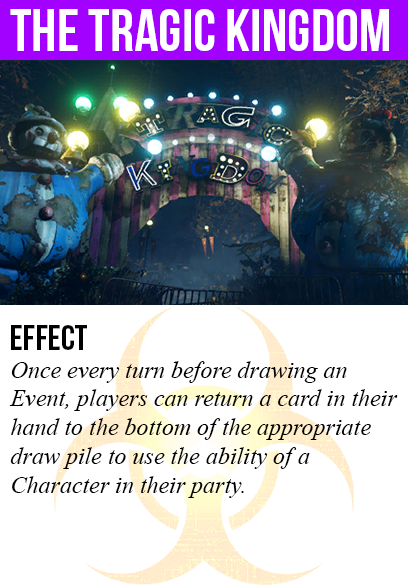
<style>
.page{position:relative;width:408px;height:585px;background:#ffffff}
.page>*{position:absolute;margin:0}
.t1{font:60px "BebasNeue";color:#ffffff}
.t2{font:36px "BebasNeue";color:#000000}
.t3{font:24px "TimesNewRomanPS-ItalicMT";color:#000000}
</style>
<div class="page">
<p class="t1" style="left:10px;top:9px;width:379px;height:42px">the tragic kingdom</p>
<p class="t2" style="left:11px;top:325px;width:76px;height:25px">Effect</p>
<p class="t3" style="left:9px;top:361px;width:389px;height:137px">Once every turn before drawing an<br>Event, players can return a card in their<br>hand to the bottom of the appropriate<br>draw pile to use the ability of a<br>Character in their party.</p>
</div>
